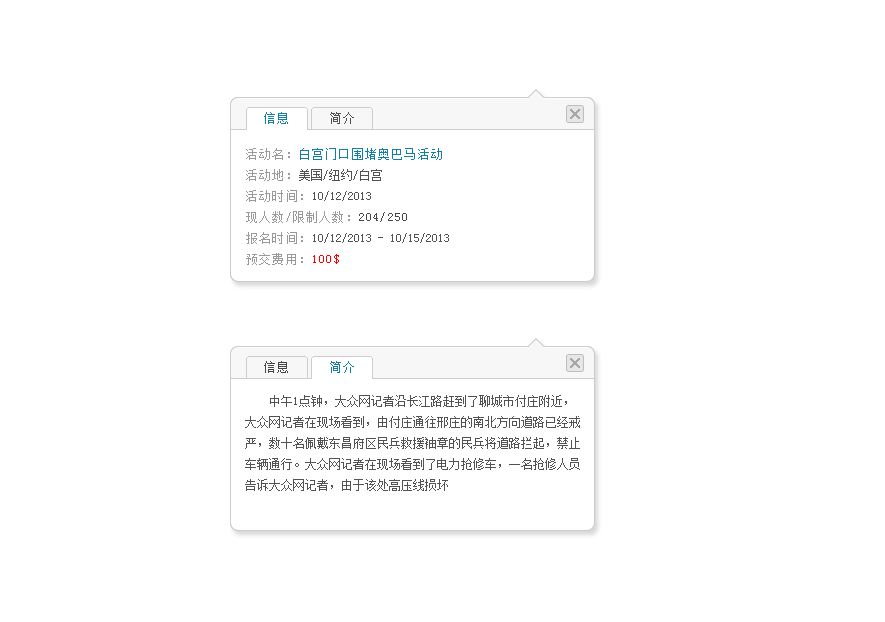
<style>
.page{position:relative;width:885px;height:622px;background:#ffffff}
.page>*{position:absolute;margin:0}
.t1{font:12px "SimSun";letter-spacing:0.1em;color:#137fa5}
.t2{font:12px "SimSun";letter-spacing:0.1em;color:#525252}
.t3{font:12px/21px "SimSun";color:#525252}
.t4{font:12px/21px "SimSun";letter-spacing:0.1em;color:#999999}
.t5{font:12px/21px "SimSun";letter-spacing:0.1em;color:#137fa5}
.t6{font:12px/21px "SimSun";letter-spacing:0.1em;color:#464646}
.t7{font:12px/21px "SimSun";letter-spacing:0.1em;color:#ff0000}
.t8{font:12px "SimSun";letter-spacing:0.1em;color:#464646}
</style>
<div class="page">
<p class="t1" style="left:264px;top:112px;width:24px;height:12px">信息</p>
<p class="t2" style="left:330px;top:112px;width:24px;height:12px">简介</p>
<p class="t3" style="left:246px;top:148px;width:203px;height:117px"><span class="t4">活动名：</span><span class="t5">白宫门口围堵奥巴马活动<br></span><span class="t4">活动地：</span>美国/纽约/白宫<br><span class="t4">活动时间：</span>10/12/2013<br><span class="t4">现人数/限制人数：</span><span class="t6">204/250<br></span><span class="t4">报名时间：</span>10/12/2013 - 10/15/2013<br><span class="t4">预交费用：</span><span class="t7">100$</span></p>
<p class="t8" style="left:264px;top:361px;width:24px;height:12px">信息</p>
<p class="t1" style="left:330px;top:361px;width:24px;height:12px">简介</p>
<p class="t3" style="left:245px;top:395px;width:335px;height:96px">中午1点钟，大众网记者沿长江路赶到了聊城市付庄附近，大众网记者在现场看到，由付庄通往邢庄的南北方向道路已经戒严，数十名佩戴东昌府区民兵救援袖章的民兵将道路拦起，禁止车辆通行。大众网记者在现场看到了电力抢修车，一名抢修人员告诉大众网记者，由于该处高压线损坏</p>
</div>
